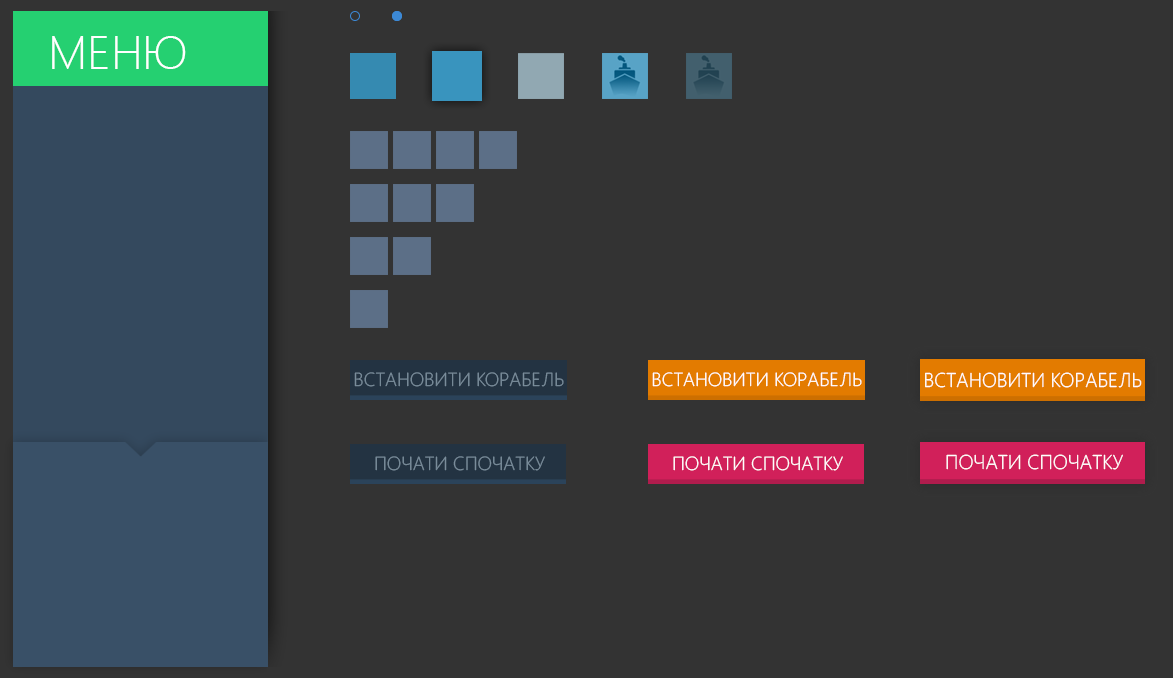
<style>
.page{position:relative;width:1173px;height:678px;background:#333333}
.page>*{position:absolute;margin:0}
.t1{font:47px "SegoeUI-Light";color:#ffffff;text-transform:uppercase}
.t2{font:19px "SegoeUI-Light";color:#7a8d9b;text-transform:uppercase}
.t3{font:19px "SegoeUI-Light";color:#ffffff;text-transform:uppercase}
.t4{font:19.9px "SegoeUI-Light";color:#ffffff;text-transform:uppercase}
.t5{font:20px "SegoeUI-Light";color:#ffffff;text-transform:uppercase}
</style>
<div class="page">
<p class="t1" style="left:52px;top:36px;width:134px;height:33px">МЕНЮ</p>
<p class="t2" style="left:354px;top:372px;width:210px;height:15px">ВСТАНОВИТИ КОРАБЕЛЬ</p>
<p class="t3" style="left:652px;top:372px;width:210px;height:15px">ВСТАНОВИТИ КОРАБЕЛЬ</p>
<p class="t4" style="left:925px;top:372px;width:217px;height:16px">ВСТАНОВИТИ КОРАБЕЛЬ</p>
<p class="t2" style="left:375px;top:456px;width:170px;height:15px">ПОЧАТИ СПОЧАТКУ</p>
<p class="t3" style="left:673px;top:456px;width:170px;height:15px">ПОЧАТИ СПОЧАТКУ</p>
<p class="t5" style="left:946px;top:454px;width:177px;height:16px">ПОЧАТИ СПОЧАТКУ</p>
</div>
